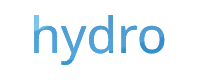
<style>
.page{position:relative;width:200px;height:80px;background:#ffffff}
.page>*{position:absolute;margin:0}
.t1{font:50px "NotoSans-Regular";color:#519fd3}
</style>
<div class="page">
<p class="t1" style="left:34px;top:15px;width:131px;height:50px">hydro</p>
</div>
